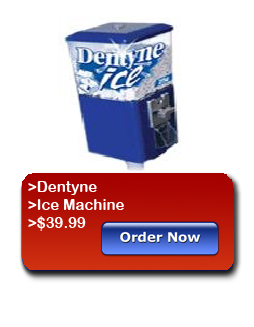
<style>
.page{position:relative;width:254px;height:327px;background:#ffffff}
.page>*{position:absolute;margin:0}
.t1{font:15px "ArialRoundedMTBold";color:#ffffff}
</style>
<div class="page">
<p class="t1" style="left:28px;top:181px;width:96px;height:50px">&gt;Dentyne<br>&gt;Ice Machine <br>&gt;$39.99</p>
</div>
